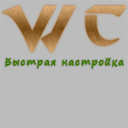
<style>
.page{position:relative;width:128px;height:128px;background:#bcbcbc}
.page>*{position:absolute;margin:0}
.t1{font:56px "StarcraftNormal";font-weight:bold}
.t2{font:9px "SegoePrint";letter-spacing:0.12em;color:#3b7800;font-weight:bold}
</style>
<div class="page">
<p class="t1" style="left:2px;top:5px;width:124px;height:48px">WC</p>
<p class="t2" style="left:5px;top:58px;width:119px;height:11px">Быстрая настройка</p>
</div>
